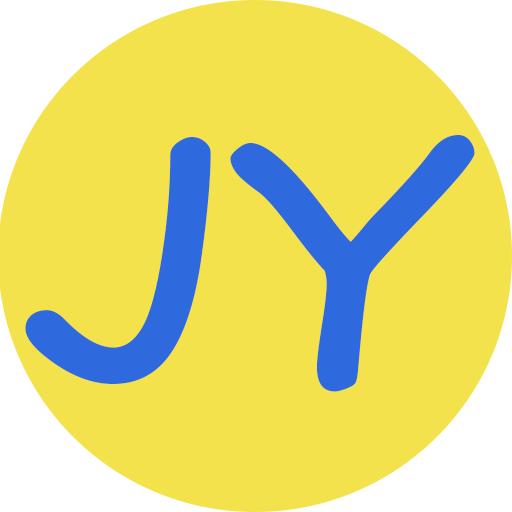
<style>
.page{position:relative;width:512px;height:512px;background:#f4e24c}
.page>*{position:absolute;margin:0}
.t1{font:332.9px "SegoePrint-Bold";color:#2e6ade}
</style>
<div class="page">
<p class="t1" style="left:25px;top:135px;width:450px;height:257px">JY</p>
</div>
